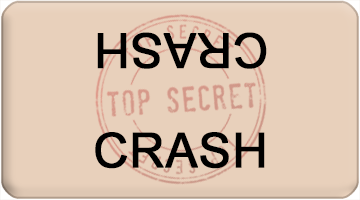
<style>
.page{position:relative;width:360px;height:200px;background:#e8d0bb}
.page>*{position:absolute;margin:0}
.t1{font:48px "ArialMT";color:#000000;font-weight:bold}
</style>
<div class="page">
<p class="t1" style="left:97px;top:32px;width:170px;height:37px;rotate:180deg">CRASH</p>
<p class="t1" style="left:95px;top:132px;width:170px;height:37px">CRASH</p>
</div>
